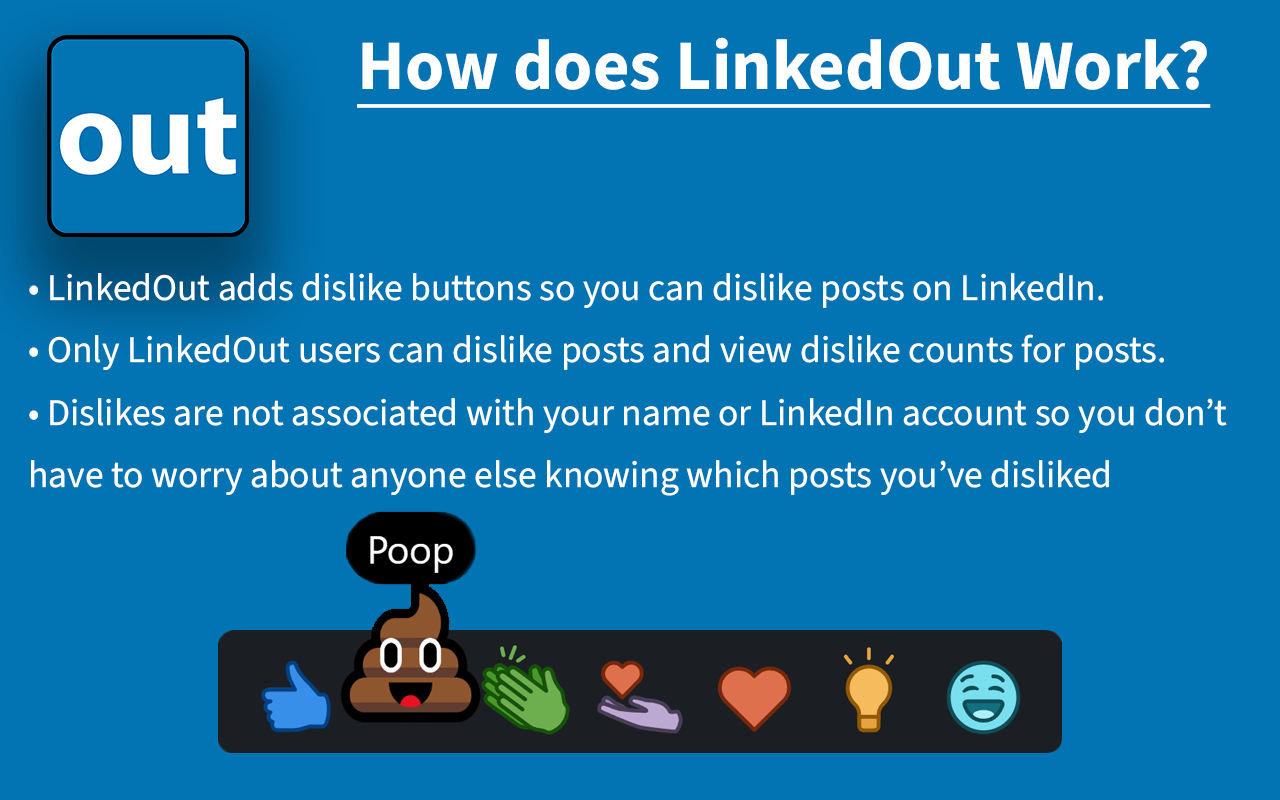
<style>
.page{position:relative;width:1280px;height:800px;background:#0274b3}
.page>*{position:absolute;margin:0}
.t1{font:70.8px "SourceSans3Roman-Bold";color:#ffffff;text-decoration:underline}
.t2{font:37.5px/62.5px "SourceSans3Roman-Regular";color:#ffffff}
</style>
<div class="page">
<p class="t1" style="left:357px;top:37px;width:854px;height:71px">How does LinkedOut Work?</p>
<p class="t2" style="left:29px;top:273px;width:1198px;height:223px">• LinkedOut adds dislike buttons so you can dislike posts on LinkedIn.<br>• Only LinkedOut users can dislike posts and view dislike counts for posts.<br>• Dislikes are not associated with your name or LinkedIn account so you don’t have to worry about anyone else knowing which posts you’ve disliked</p>
</div>
